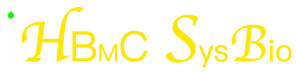
<style>
.page{position:relative;width:296px;height:74px;background:#ffffff}
.page>*{position:absolute;margin:0}
.t1{font:30px "PingFangSC-Regular";color:#ffe600}
.t2{font:60px "Apple-Chancery";color:#ffe600}
.t3{font:41.5px "PingFangSC-Regular";color:#ffe600}
.t4{font:24px "PingFangSC-Regular";color:#ffe600}
.t5{font:68.5px "Apple-Chancery";color:#ffe600}
.t6{font:53.5px "Apple-Chancery";color:#ffe600}
</style>
<div class="page">
<p class="t1" style="left:22px;top:7px;width:270px;height:61px"><span class="t2">H</span><span class="t3">B</span><span class="t4">M</span><span class="t3">C </span><span class="t5">S</span>ys<span class="t6">B</span>io</p>
</div>
